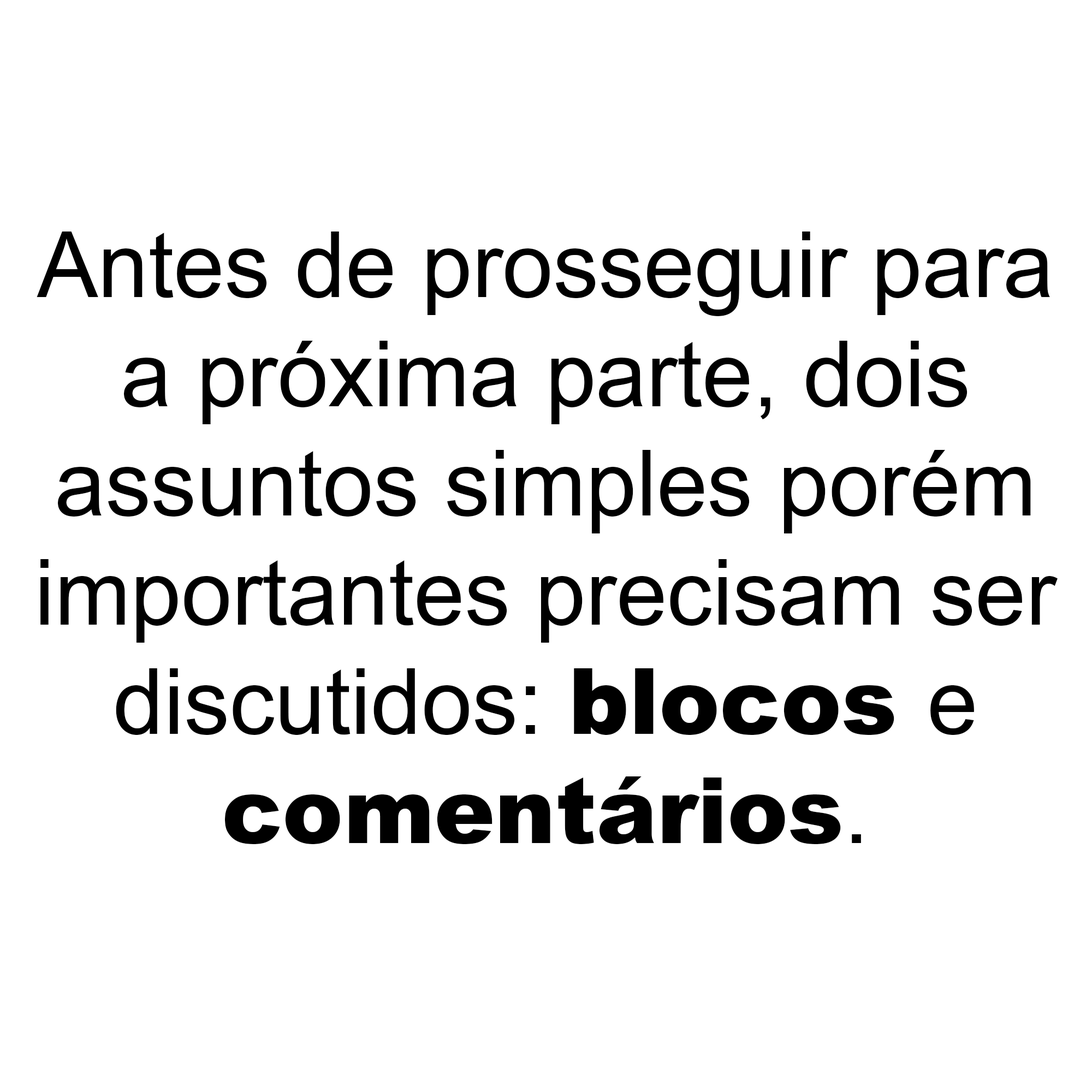
<style>
.page{position:relative;width:1092px;height:1092px;background:#ffffff}
.page>*{position:absolute;margin:0}
.t1{font:91px "ArialMT";color:#000000}
.t2{font:91px "Arial-Black";color:#000000}
</style>
<div class="page">
<p class="t1" style="left:37px;top:232px;width:1021px;height:612px;text-align:center">Antes de prosseguir para<br>a próxima parte, dois<br>assuntos simples porém<br>importantes precisam ser<br>discutidos: <span class="t2">blocos </span>e<br><span class="t2">comentários</span>.</p>
</div>
